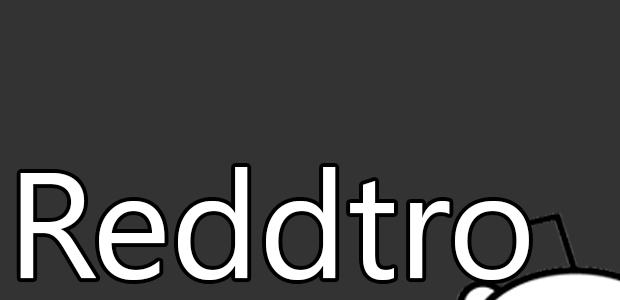
<style>
.page{position:relative;width:620px;height:300px;background:#333333}
.page>*{position:absolute;margin:0}
.t1{font:150px "SegoeUI";color:#ffffff}
</style>
<div class="page">
<p class="t1" style="left:20px;top:167px;width:509px;height:113px">Reddtro</p>
</div>
